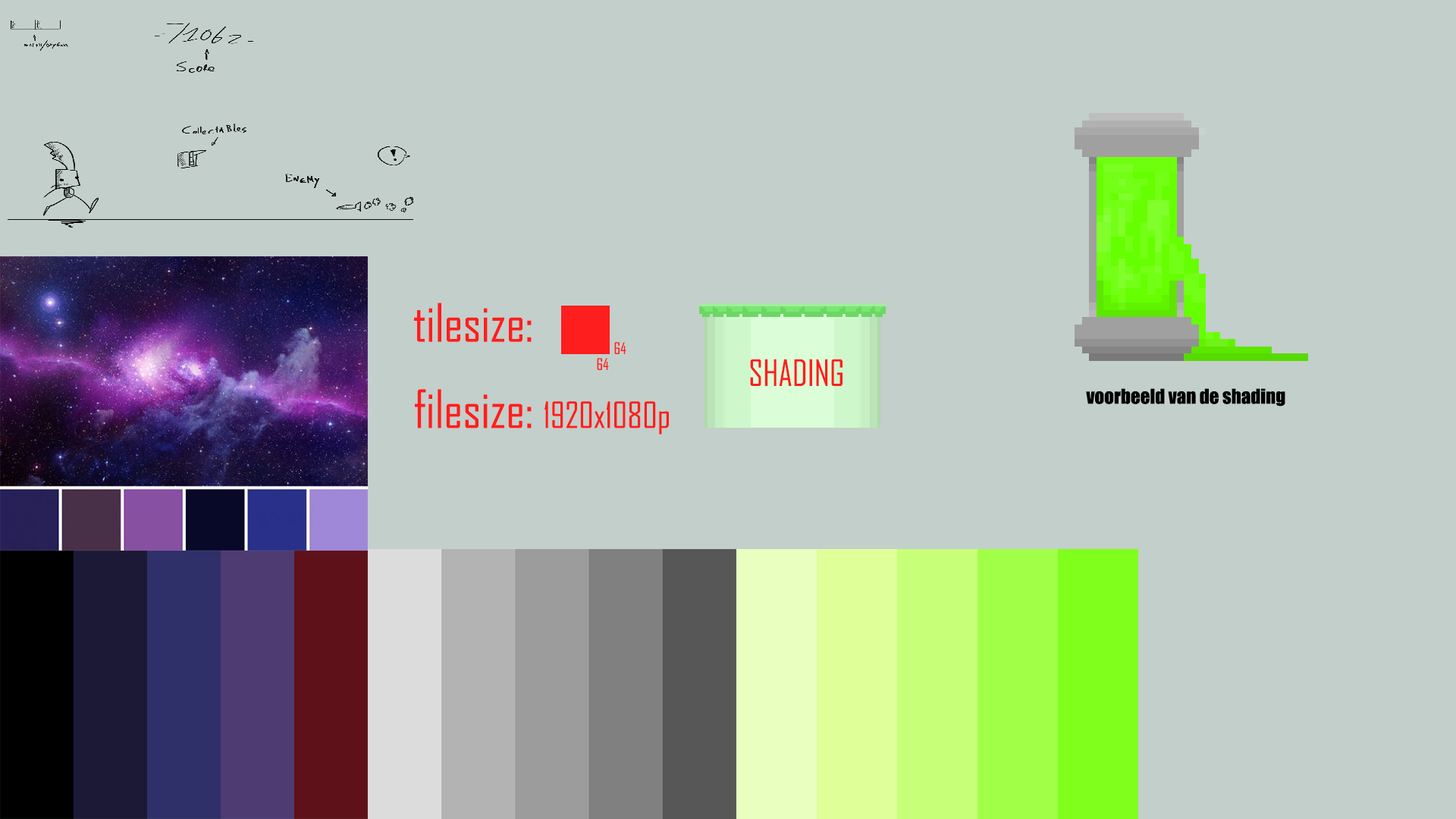
<style>
.page{position:relative;width:1456px;height:819px;background:#c3cfca}
.page>*{position:absolute;margin:0}
.t1{font:50.6px "AgencyFB-Reg";color:#ff1e1e}
.t2{font:15.4px "AgencyFB-Reg";color:#ff1e1e}
.t3{font:34.8px "AgencyFB-Reg";color:#ff1e1e}
.t4{font:19px "Impact";color:#000000}
</style>
<div class="page">
<p class="t1" style="left:414px;top:303px;width:118px;height:39px">tilesize:</p>
<p class="t2" style="left:614px;top:342px;width:12px;height:12px">64</p>
<p class="t2" style="left:597px;top:358px;width:12px;height:12px">64</p>
<p class="t3" style="left:750px;top:359px;width:92px;height:27px">SHADING</p>
<p class="t3" style="left:415px;top:389px;width:254px;height:46px"><span class="t1">filesize: </span>1920x1080p</p>
<p class="t4" style="left:1086px;top:388px;width:199px;height:18px">voorbeeld van de shading</p>
</div>
